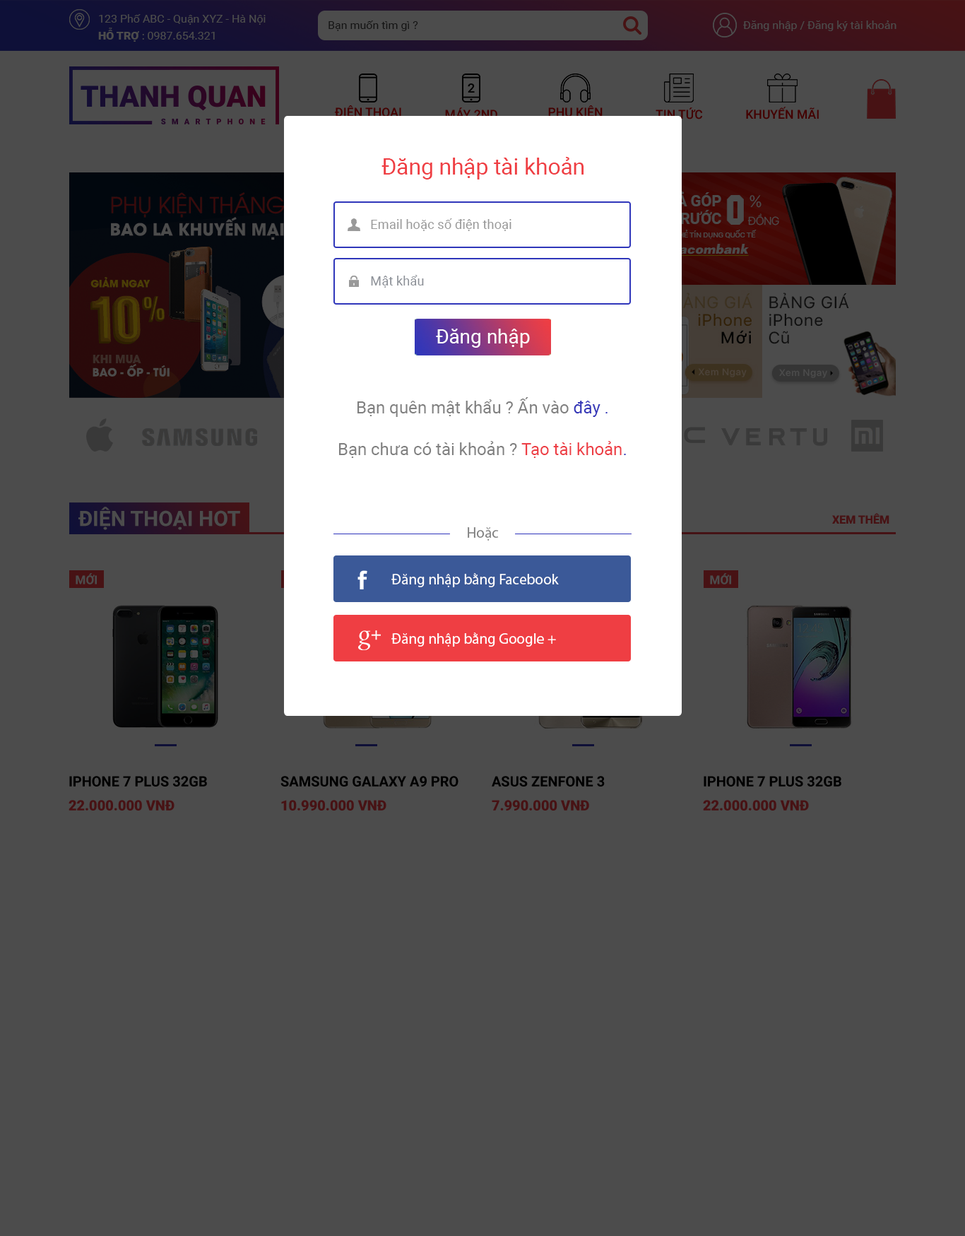
<style>
.page{position:relative;width:965px;height:1236px;background:#4c4c4c}
.page>*{position:absolute;margin:0}
.t1{font:11.3px "Roboto-Regular";color:#4c4c4c}
.t2{font:11.3px "Roboto-Black";color:#4c4c4c}
.t3{font:11.3px "Roboto-Regular";color:#131313}
.t4{font:12.4px "Roboto-Medium";color:#430000}
.t5{font:22.4px "Roboto-Regular";color:#ef3e43}
.t6{font:13px "Roboto-Regular";color:#999999}
.t7{font:13px "Roboto-Regular";color:#8d9198}
.t8{font:19.8px "Roboto-Regular";color:#ffffff}
.t9{font:17px "Roboto-Regular";color:#808080}
.t10{font:17px "Roboto-Regular";color:#3436b8}
.t11{font:17px "Roboto-Regular";color:#3136ba}
.t12{font:17px "Roboto-Regular";color:#ed3e45}
.t13{font:21.2px "Roboto-Bold";color:#4c4c4c}
.t14{font:11.3px "Roboto-Black";color:#471214}
.t15{font:14.9px "MyriadPro-Regular";color:#808080}
.t16{font:12px "Roboto-Bold";color:#4c4c4c}
.t17{font:14.9px "MyriadPro-Regular";color:#ffffff}
.t18{font:14.1px "Roboto-Bold";color:#000000}
.t19{font:14.1px "Roboto-Black";color:#471214}
</style>
<div class="page">
<p class="t1" style="left:99px;top:14px;width:167px;height:11px">123 Phố ABC - Quận XYZ - Hà Nội</p>
<p class="t1" style="left:98px;top:28px;width:117px;height:14px"><span class="t2">HỖ TRỢ </span>: 0987.654.321</p>
<p class="t3" style="left:329px;top:20px;width:89px;height:11px">Bạn muốn tìm gì ?</p>
<p class="t1" style="left:743px;top:20px;width:154px;height:11px">Đăng nhập / Đăng ký tài khoản</p>
<p class="t4" style="left:335px;top:105px;width:66px;height:14px">ĐIỆN THOẠI</p>
<p class="t4" style="left:548px;top:105px;width:55px;height:14px">PHỤ KIỆN</p>
<p class="t4" style="left:656px;top:107px;width:46px;height:12px">TIN TỨC</p>
<p class="t4" style="left:746px;top:107px;width:73px;height:12px">KHUYẾN MÃI</p>
<p class="t5" style="left:381px;top:157px;width:203px;height:22px">Đăng nhập tài khoản</p>
<p class="t6" style="left:371px;top:218px;width:140px;height:13px">Email hoặc số điện thoại</p>
<p class="t7" style="left:371px;top:275px;width:53px;height:13px">Mật khẩu</p>
<p class="t8" style="left:436px;top:329px;width:94px;height:19px">Đăng nhập</p>
<p class="t9" style="left:357px;top:397px;width:251px;height:20px">Bạn quên mật khẩu ? Ấn vào <span class="t10">đây </span><span class="t11">.</span></p>
<p class="t9" style="left:339px;top:441px;width:287px;height:17px">Bạn chưa có tài khoản ? <span class="t12">Tạo tài khoản</span><span class="t11">.</span></p>
<p class="t13" style="left:78px;top:507px;width:162px;height:23px">ĐIỆN THOẠI HOT</p>
<p class="t14" style="left:832px;top:513px;width:57px;height:10px">XEM THÊM</p>
<p class="t15" style="left:468px;top:527px;width:31px;height:13px">Hoặc</p>
<p class="t16" style="left:76px;top:573px;width:21px;height:11px">MỚI</p>
<p class="t17" style="left:391px;top:573px;width:168px;height:14px">Đăng nhập bằng Facebook</p>
<p class="t16" style="left:710px;top:573px;width:21px;height:11px">MỚI</p>
<p class="t16" style="left:710px;top:573px;width:21px;height:11px">MỚI</p>
<p class="t17" style="left:391px;top:632px;width:165px;height:14px">Đăng nhập bằng Google +</p>
<p class="t18" style="left:69px;top:776px;width:138px;height:10px">IPHONE 7 PLUS 32GB</p>
<p class="t18" style="left:280px;top:776px;width:179px;height:10px">SAMSUNG GALAXY A9 PRO</p>
<p class="t18" style="left:492px;top:776px;width:113px;height:10px">ASUS ZENFONE 3</p>
<p class="t18" style="left:704px;top:776px;width:137px;height:10px">IPHONE 7 PLUS 32GB</p>
<p class="t19" style="left:69px;top:800px;width:105px;height:10px">22.000.000 VNĐ</p>
<p class="t19" style="left:281px;top:800px;width:105px;height:10px">10.990.000 VNĐ</p>
<p class="t19" style="left:492px;top:800px;width:97px;height:10px">7.990.000 VNĐ</p>
<p class="t19" style="left:703px;top:800px;width:106px;height:10px">22.000.000 VNĐ</p>
</div>
